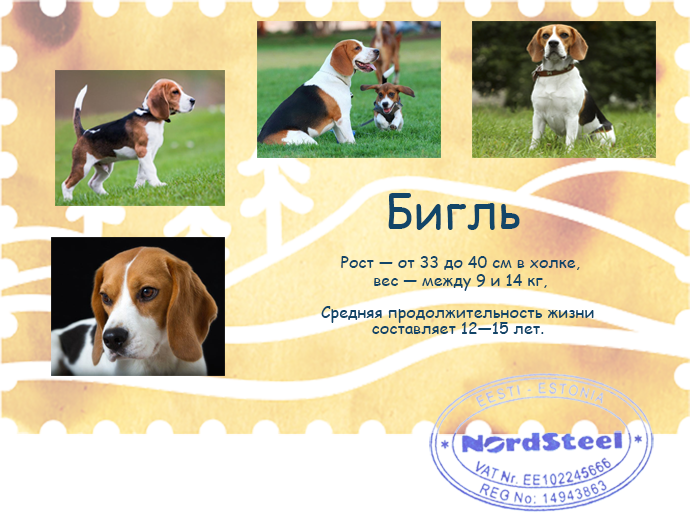
<style>
.page{position:relative;width:690px;height:512px;background:#ffffff}
.page>*{position:absolute;margin:0}
.t1{font:48px "ComicSansMS";color:#124568}
.t2{font:16px/18px "ComicSansMS";color:#124568}
.t3{font:16px/16px "ComicSansMS";color:#124568}
</style>
<div class="page">
<p class="t1" style="left:388px;top:193px;width:132px;height:37px">Бигль</p>
<p class="t2" style="left:321px;top:256px;width:273px;height:78px;text-align:center">Рост — от 33 до 40 см в холке, <br>вес — между 9 и 14 кг,<br><span class="t3"><br>Средняя продолжительность жизни <br>составляет 12—15 лет.</span></p>
</div>
